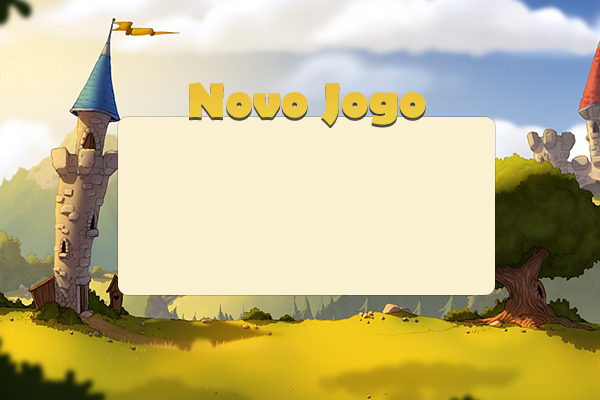
<style>
.page{position:relative;width:600px;height:400px}
.page>*{position:absolute;margin:0}
.t1{font:50px "BerlinSansFB-Bold";color:#edc63b}
</style>
<div class="page">
<p class="t1" style="left:189px;top:82px;width:237px;height:44px">Novo Jogo</p>
</div>
